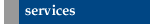
<style>
.page{position:relative;width:154px;height:26px;background:#004684}
.page>*{position:absolute;margin:0}
.t1{font:14px "BookAntiqua-Bold";color:#ffffff}
</style>
<div class="page">
<p class="t1" style="left:25px;top:4px;width:50px;height:12px">services</p>
</div>
